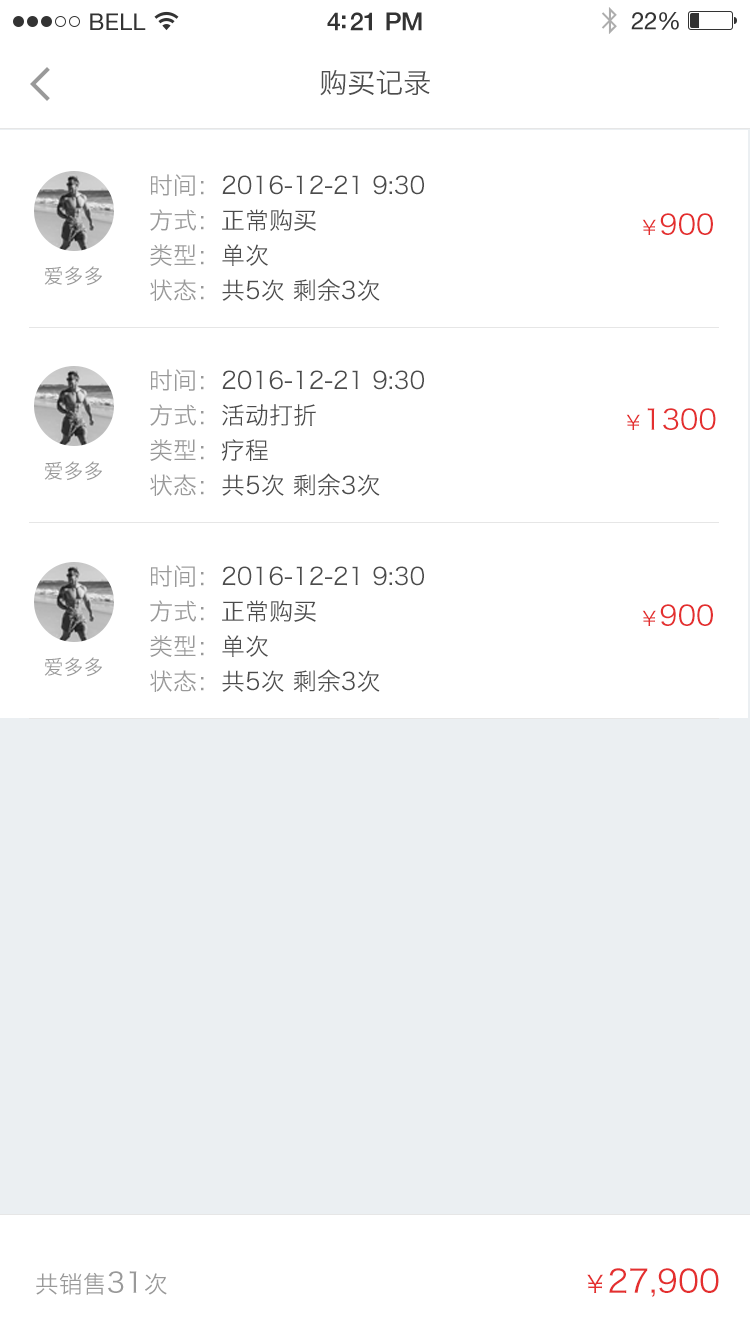
<style>
.page{position:relative;width:750px;height:1334px;background:#ffffff}
.page>*{position:absolute;margin:0}
.t1{font:28px "HiraginoSansGB-W3";color:#4d4d4d}
.t2{font:24px/35px "HiraginoSansGB-W3";color:#4c4c4c}
.t3{font:24px/35px "HiraginoSansGB-W3";color:#999999}
.t4{font:28px "HiraginoSansGB-W3";color:#e42f2f}
.t5{font:20px "HiraginoSansGB-W3";color:#999999}
.t6{font:20px "HiraginoSansGB-W3";color:#e42f2f}
.t7{font:32px "HiraginoSansGB-W3";color:#e42f2f}
.t8{font:24px "HiraginoSansGB-W3";color:#999999}
.t9{font:28px "HiraginoSansGB-W3";color:#999999}
.t10{font:24px "HiraginoSansGB-W3";color:#e42f2f}
</style>
<div class="page">
<p class="t1" style="left:320px;top:70px;width:110px;height:26px">购买记录</p>
<p class="t2" style="left:150px;top:174px;width:274px;height:127px;text-align:justify"><span class="t3">时间：</span>2016-12-21 9:30<br><span class="t3">方式：</span>正常购买<br><span class="t3">类型：</span>单次<br><span class="t3">状态：</span>共5次 剩余3次</p>
<p class="t4" style="left:642px;top:213px;width:71px;height:22px"><span class="t5">                                        </span><span class="t6">￥</span>900</p>
<p class="t5" style="left:44px;top:266px;width:58px;height:20px">爱多多</p>
<p class="t2" style="left:150px;top:369px;width:274px;height:127px;text-align:justify"><span class="t3">时间：</span>2016-12-21 9:30<br><span class="t3">方式：</span>活动打折<br><span class="t3">类型：</span>疗程<br><span class="t3">状态：</span>共5次 剩余3次</p>
<p class="t4" style="left:626px;top:408px;width:90px;height:22px"><span class="t5">                                        </span><span class="t6">￥</span>1300</p>
<p class="t5" style="left:44px;top:461px;width:58px;height:20px">爱多多</p>
<p class="t2" style="left:150px;top:565px;width:274px;height:127px;text-align:justify"><span class="t3">时间：</span>2016-12-21 9:30<br><span class="t3">方式：</span>正常购买<br><span class="t3">类型：</span>单次<br><span class="t3">状态：</span>共5次 剩余3次</p>
<p class="t4" style="left:642px;top:604px;width:71px;height:22px"><span class="t5">                                        </span><span class="t6">￥</span>900</p>
<p class="t5" style="left:44px;top:657px;width:58px;height:20px">爱多多</p>
<p class="t7" style="left:36px;top:1268px;width:683px;height:29px"><span class="t8">共销售</span><span class="t9">31</span><span class="t8">次                                                    </span><span class="t10">￥</span>27,900</p>
</div>
